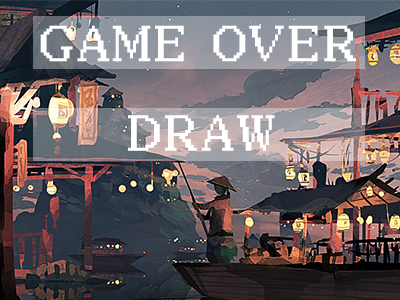
<style>
.page{position:relative;width:400px;height:300px}
.page>*{position:absolute;margin:0}
.t1{font:47.5px "IPix";color:#ffffff;text-transform:uppercase;scale:0.97 1}
</style>
<div class="page">
<p class="t1" style="left:40px;top:25px;width:316px;height:37px">GAME OVER</p>
<p class="t1" style="left:128px;top:115px;width:147px;height:36px">DRAW</p>
</div>
